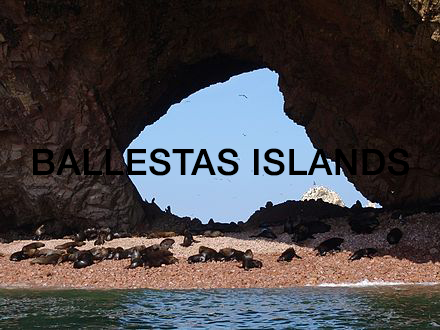
<style>
.page{position:relative;width:440px;height:330px}
.page>*{position:absolute;margin:0}
.t1{font:36px "HelveticaNeue-Medium";letter-spacing:0.025em;color:#000000}
</style>
<div class="page">
<p class="t1" style="left:33px;top:148px;width:376px;height:28px">BALLESTAS ISLANDS</p>
</div>
